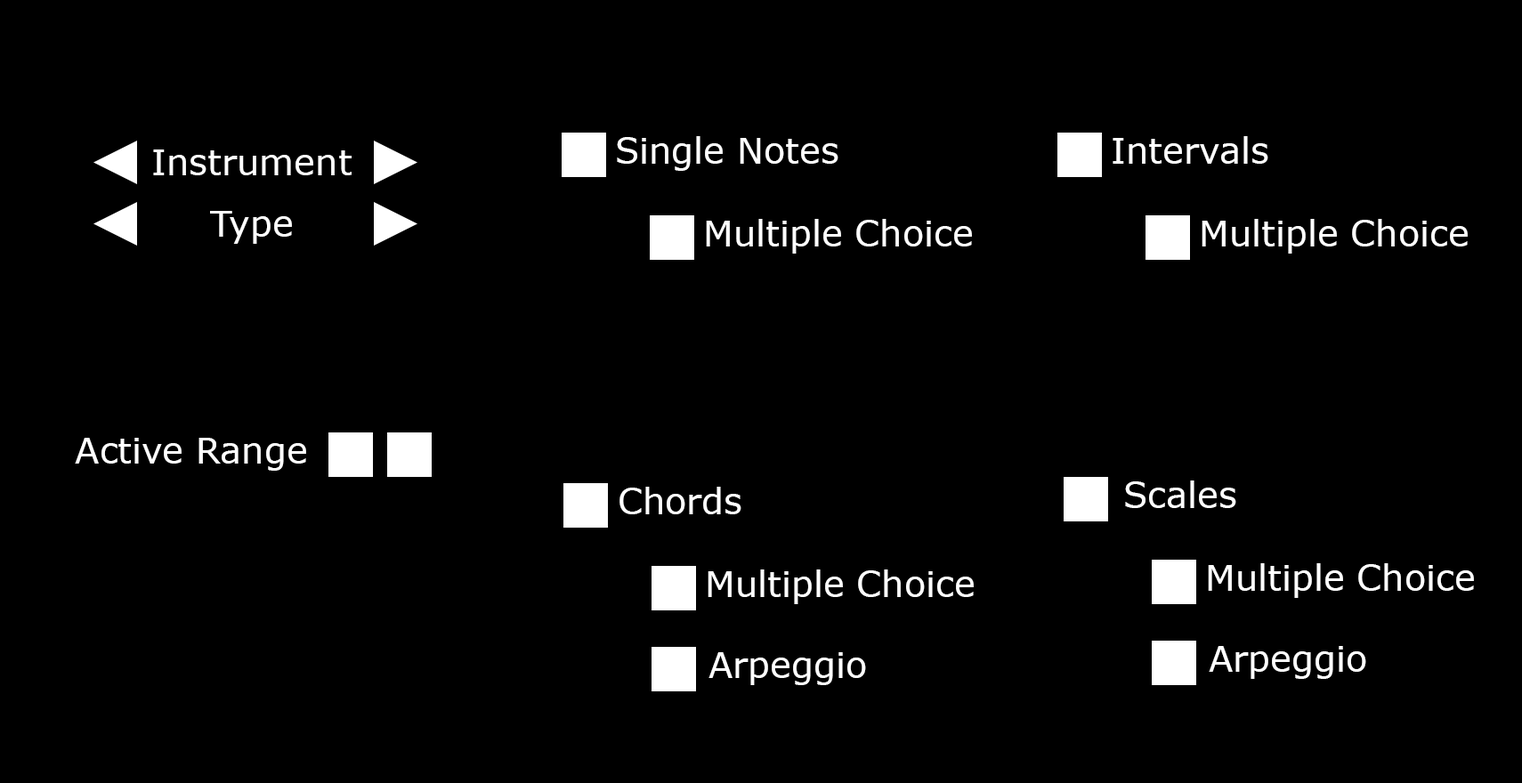
<style>
.page{position:relative;width:1522px;height:783px;background:#000000}
.page>*{position:absolute;margin:0}
.t1{font:35.6px "Verdana";color:#ffffff}
</style>
<div class="page">
<p class="t1" style="left:617px;top:136px;width:222px;height:35px">Single Notes</p>
<p class="t1" style="left:1113px;top:136px;width:156px;height:28px">Intervals</p>
<p class="t1" style="left:153px;top:150px;width:199px;height:25px">Instrument</p>
<p class="t1" style="left:210px;top:211px;width:82px;height:33px">Type</p>
<p class="t1" style="left:706px;top:219px;width:266px;height:35px">Multiple Choice</p>
<p class="t1" style="left:1202px;top:219px;width:266px;height:35px">Multiple Choice</p>
<p class="t1" style="left:75px;top:438px;width:231px;height:33px">Active Range</p>
<p class="t1" style="left:1125px;top:481px;width:111px;height:27px">Scales</p>
<p class="t1" style="left:620px;top:487px;width:122px;height:28px">Chords</p>
<p class="t1" style="left:708px;top:570px;width:266px;height:34px">Multiple Choice</p>
<p class="t1" style="left:1208px;top:563px;width:266px;height:35px">Multiple Choice</p>
<p class="t1" style="left:709px;top:653px;width:157px;height:32px">Arpeggio</p>
<p class="t1" style="left:1209px;top:646px;width:157px;height:33px">Arpeggio</p>
</div>
